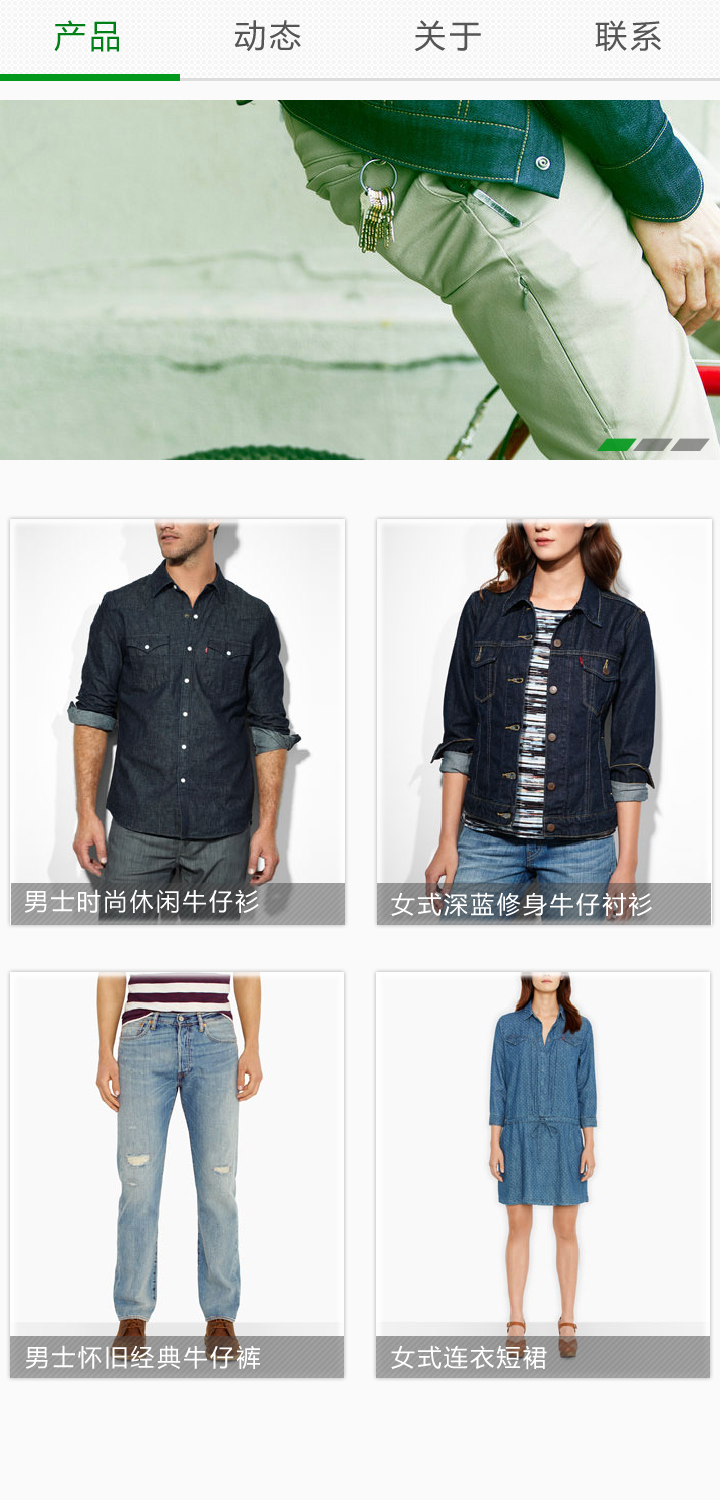
<style>
.page{position:relative;width:720px;height:1500px}
.page>*{position:absolute;margin:0}
.t1{font:32px "MicrosoftYaHei";letter-spacing:0.1em;color:#028017}
.t2{font:32px "MicrosoftYaHei";letter-spacing:0.1em;color:#555555}
.t3{font:24px "MicrosoftYaHei";letter-spacing:0.1em;color:#ffffff}
</style>
<div class="page">
<p class="t1" style="left:54px;top:20px;width:65px;height:32px">产品</p>
<p class="t2" style="left:234px;top:20px;width:67px;height:32px">动态</p>
<p class="t2" style="left:414px;top:20px;width:67px;height:32px">关于</p>
<p class="t2" style="left:595px;top:20px;width:66px;height:31px">联系</p>
<p class="t3" style="left:24px;top:889px;width:235px;height:24px">男士时尚休闲牛仔衫</p>
<p class="t3" style="left:391px;top:892px;width:261px;height:24px">女式深蓝修身牛仔衬衫</p>
<p class="t3" style="left:25px;top:1345px;width:235px;height:24px">男士怀旧经典牛仔裤</p>
<p class="t3" style="left:391px;top:1345px;width:156px;height:25px">女式连衣短裙</p>
</div>
